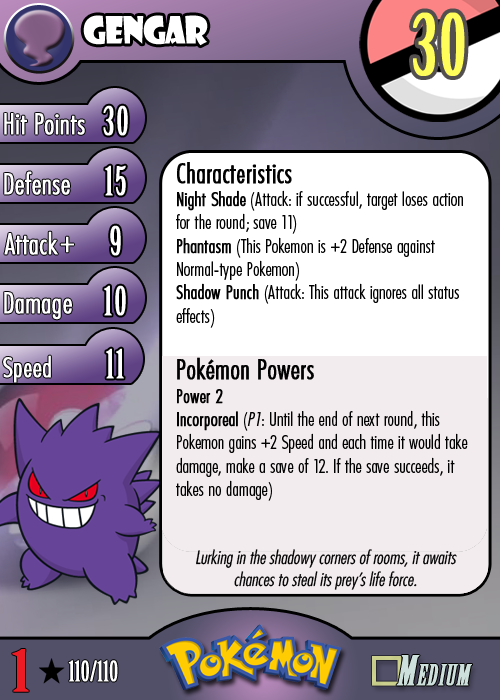
<style>
.page{position:relative;width:500px;height:700px}
.page>*{position:absolute;margin:0}
.t1{font:36.7px "ShowcardGothic-Reg";letter-spacing:-0.025em;color:#ffffff;scale:0.91 1}
.t2{font:83.3px "BirchStd";letter-spacing:0.025em;color:#fffd59;font-weight:bold}
.t3{font:27.8px "Futura-CondensedLight";color:#ffffff;font-weight:bold}
.t4{font:38.9px "BirchStd";letter-spacing:0.035em;color:#ffffff;font-weight:bold}
.t5{font:19.4px "FuturaCondensedBQ-Light";color:#010101}
.t6{font:27.8px "FuturaCondensedBQ-Light";color:#010101;font-weight:bold}
.t7{font:19.4px "FuturaCondensedBQ-Light";color:#010101;font-weight:bold}
.t8{font:19.4px "FuturaCondensedBQ-Light";color:#010101;font-style:italic}
.t9{font:30.6px "Futura-CondensedLight";color:#ffffff;font-weight:bold}
.t10{font:27.8px "FuturaCondensedBQ-Light";color:#ffffff;font-weight:bold}
.t11{font:18.1px "Futura-CondensedLight";color:#010101;font-style:italic}
.t12{font:55.6px "BirchStd";color:#ed1c24;font-weight:bold;scale:1.5 1}
.t13{font:27.8px "BirchStd";color:#ffffff;font-weight:bold}
</style>
<div class="page">
<p class="t1" style="left:83px;top:15px;width:125px;height:31px">gengar</p>
<p class="t2" style="left:413px;top:12px;width:52px;height:64px">30</p>
<p class="t3" style="left:4px;top:113px;width:81px;height:22px">Hit Points</p>
<p class="t4" style="left:103px;top:105px;width:25px;height:31px">30</p>
<p class="t3" style="left:4px;top:171px;width:66px;height:24px">Defense</p>
<p class="t4" style="left:105px;top:165px;width:21px;height:31px">15</p>
<p class="t5" style="left:176px;top:162px;width:292px;height:339px"><span class="t6">Characteristics<br></span><span class="t7">Night Shade</span> (Attack: if successful, target loses action for the round; save 11)<br><span class="t7">Phantasm</span> (This Pokemon is +2 Defense against Normal-type Pokemon)<br><span class="t7">Shadow Punch</span> (Attack: This attack ignores all status effects)<br><br><span class="t6">Pokémon Powers<br></span><span class="t7">Power 2<br>Incorporeal</span> (<span class="t8">P1</span>: Until the end of next round, this Pokemon gains +2 Speed and each time it would take damage, make a save of 12. If the save succeeds, it takes no damage)</p>
<p class="t3" style="left:4px;top:231px;width:54px;height:24px">Attack</p>
<p class="t4" style="left:110px;top:225px;width:11px;height:31px">9</p>
<p class="t9" style="left:60px;top:236px;width:14px;height:17px">+</p>
<p class="t3" style="left:4px;top:292px;width:68px;height:28px">Damage</p>
<p class="t4" style="left:104px;top:285px;width:22px;height:31px">10</p>
<p class="t4" style="left:106px;top:348px;width:18px;height:31px">11</p>
<p class="t10" style="left:3px;top:355px;width:48px;height:28px">Speed</p>
<p class="t11" style="left:196px;top:549px;width:261px;height:41px;text-align:center">Lurking in the shadowy corners of rooms, it awaits chances to steal its prey’s life force.</p>
<p class="t12" style="left:12px;top:649px;width:17px;height:43px">1</p>
<p class="t13" style="left:68px;top:660px;width:50px;height:22px">110/110</p>
</div>
